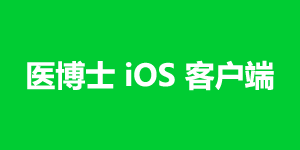
<style>
.page{position:relative;width:300px;height:150px;background:#00cc33}
.page>*{position:absolute;margin:0}
.t1{font:30px "MicrosoftYaHei-Bold";color:#ffffff}
</style>
<div class="page">
<p class="t1" style="left:27px;top:60px;width:247px;height:31px">医博士 iOS 客户端</p>
</div>
